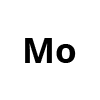
<style>
.page{position:relative;width:100px;height:100px;background:#ffffff}
.page>*{position:absolute;margin:0}
.t1{font:35px "OpenSans-Bold";color:#000000}
</style>
<div class="page">
<p class="t1" style="left:25px;top:38px;width:51px;height:25px">Mo</p>
</div>
